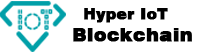
<style>
.page{position:relative;width:201px;height:54px;background:#ffffff}
.page>*{position:absolute;margin:0}
.t1{font:15.2px "Swiss721BT-Black";letter-spacing:0.002em;color:#000000;font-weight:bold}
.t2{font:18.2px "Swiss721BT-Black";letter-spacing:0.002em;color:#000000;font-weight:bold;scale:1.03 1}
</style>
<div class="page">
<p class="t1" style="left:84px;top:8px;width:84px;height:15px">Hyper IoT</p>
<p class="t2" style="left:73px;top:28px;width:119px;height:14px">Blockchain</p>
</div>
